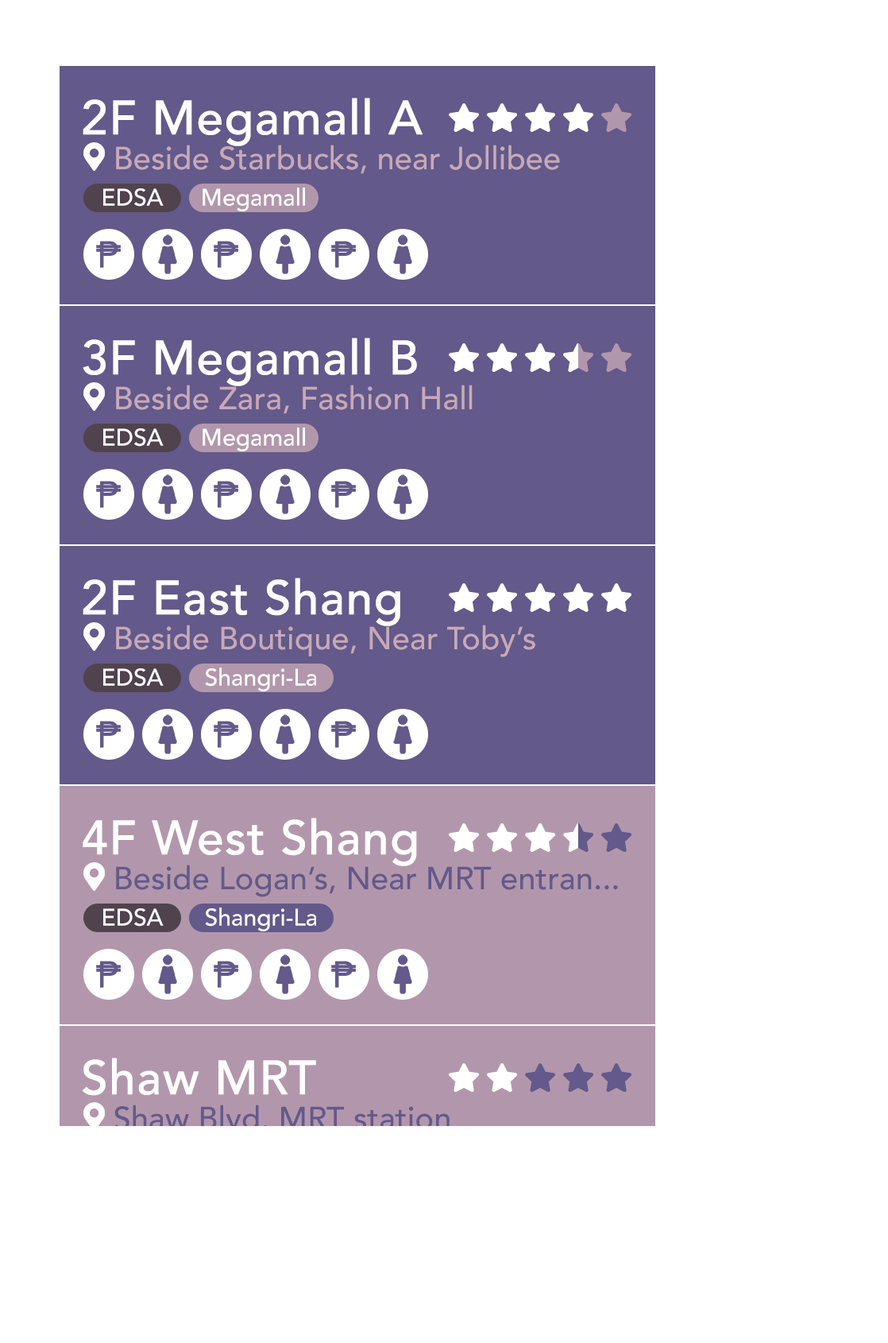
<style>
.page{position:relative;width:888px;height:1343px;background:#ffffff}
.page>*{position:absolute;margin:0}
.t1{font:47.7px "Avenir-Medium";color:#ffffff;font-weight:bold}
.t2{font:31.8px "Avenir-Medium";color:#c8a9b7}
.t3{font:23.8px "Avenir-Medium";color:#ffffff}
.t4{font:31.8px "Avenir-Medium";color:#63598a}
</style>
<div class="page">
<p class="t1" style="left:83px;top:98px;width:340px;height:48px">2F Megamall A</p>
<p class="t2" style="left:116px;top:145px;width:444px;height:29px">Beside Starbucks, near Jollibee</p>
<p class="t3" style="left:103px;top:188px;width:61px;height:19px">EDSA</p>
<p class="t3" style="left:203px;top:187px;width:102px;height:24px">Megamall</p>
<p class="t1" style="left:83px;top:338px;width:334px;height:48px">3F Megamall B</p>
<p class="t2" style="left:116px;top:385px;width:357px;height:29px">Beside Zara, Fashion Hall</p>
<p class="t3" style="left:103px;top:428px;width:61px;height:18px">EDSA</p>
<p class="t3" style="left:203px;top:427px;width:102px;height:24px">Megamall</p>
<p class="t1" style="left:83px;top:578px;width:317px;height:48px">2F East Shang</p>
<p class="t2" style="left:116px;top:624px;width:419px;height:33px">Beside Boutique, Near Toby’s</p>
<p class="t3" style="left:103px;top:668px;width:61px;height:18px">EDSA</p>
<p class="t3" style="left:205px;top:667px;width:111px;height:24px">Shangri-La</p>
<p class="t1" style="left:83px;top:817px;width:334px;height:49px">4F West Shang</p>
<p class="t4" style="left:116px;top:864px;width:502px;height:33px">Beside Logan’s, Near MRT entran...</p>
<p class="t3" style="left:103px;top:908px;width:61px;height:18px">EDSA</p>
<p class="t3" style="left:205px;top:907px;width:111px;height:24px">Shangri-La</p>
<p class="t1" style="left:82px;top:1057px;width:234px;height:39px">Shaw MRT</p>
<p class="t4" style="left:114px;top:1104px;width:336px;height:26px">Shaw Blvd. MRT station</p>
</div>
